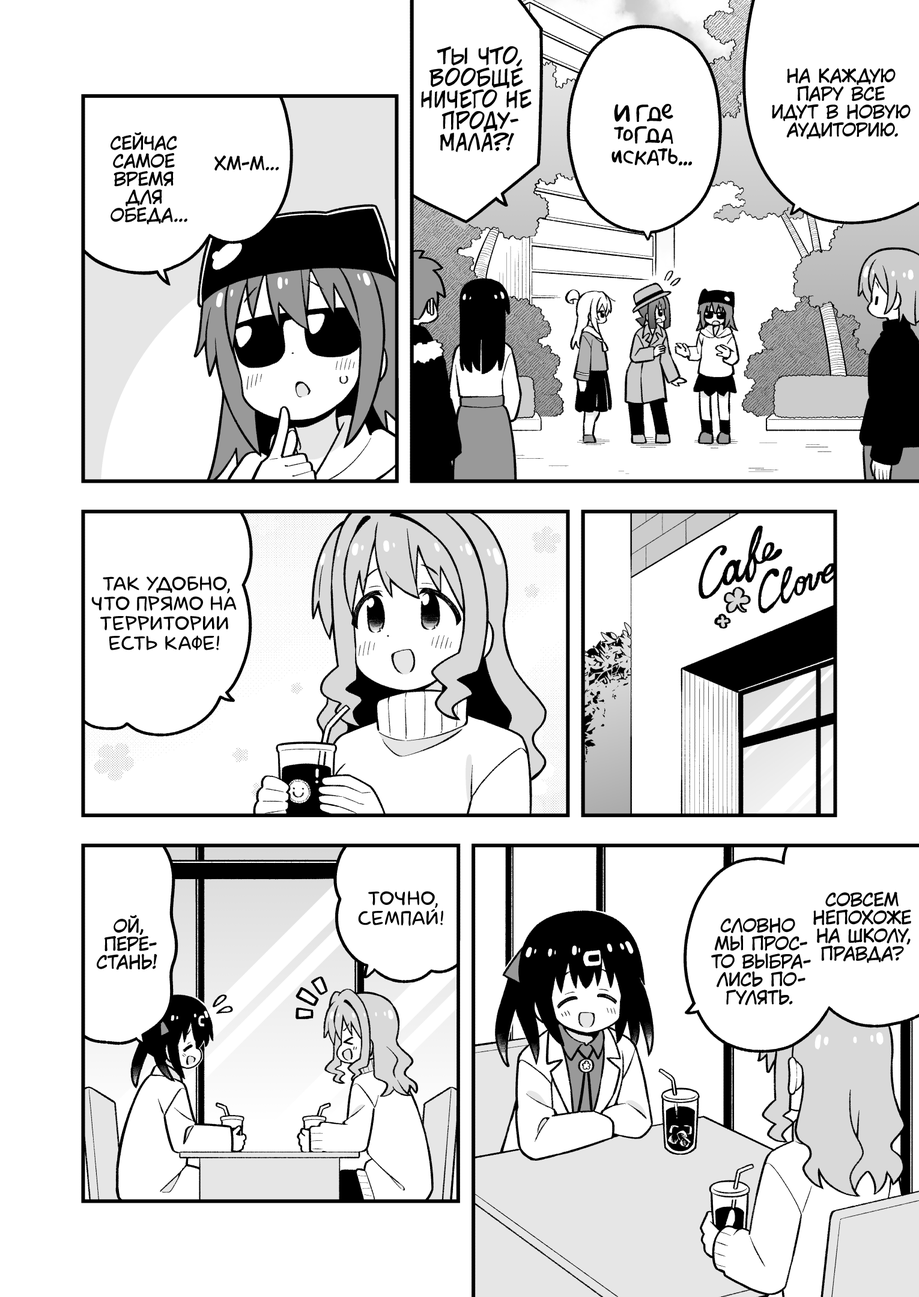
<style>
.page{position:relative;width:919px;height:1297px;background:#ffffff}
.page>*{position:absolute;margin:0}
.t1{font:21.6px "v_CCJeffCampbell";color:#000000;text-transform:uppercase}
.t2{font:18px "KuraiVoice2";color:#000000;text-transform:uppercase}
.t3{font:21.6px "AkbarPlain";color:#000000}
.t4{font:19.8px "laCartoonerie";color:#000000;text-transform:uppercase}
</style>
<div class="page">
<p class="t1" style="left:421px;top:46px;width:111px;height:107px;text-align:center">Ты что,<br>вообще<br>ничего не<br>проду-<br>мала?!</p>
<p class="t2" style="left:772px;top:68px;width:139px;height:71px;text-align:center">На каждую<br>пару все<br>идут в новую<br>аудиторию.</p>
<p class="t3" style="left:611px;top:104px;width:81px;height:62px;text-align:center">И где<br>тогда<br>искать...</p>
<p class="t2" style="left:111px;top:132px;width:76px;height:93px;text-align:center">Сейчас<br>самое<br>время<br>для<br>обеда...</p>
<p class="t2" style="left:214px;top:156px;width:65px;height:15px">Хм-м...</p>
<p class="t4" style="left:91px;top:576px;width:146px;height:75px;text-align:center">Так удобно,<br>что прямо на<br>территории<br>есть кафе!</p>
<p class="t4" style="left:358px;top:891px;width:85px;height:35px;text-align:center">Точно,<br>семпай!</p>
<p class="t2" style="left:813px;top:892px;width:98px;height:71px;text-align:center">Совсем<br>непохоже<br>на школу,<br>правда?</p>
<p class="t2" style="left:97px;top:915px;width:60px;height:55px;text-align:center">Ой,<br>пере-<br>стань!</p>
<p class="t2" style="left:711px;top:918px;width:100px;height:88px;text-align:center">Словно<br>мы прос-<br>то выбра-<br>лись по-<br>гулять.</p>
</div>
